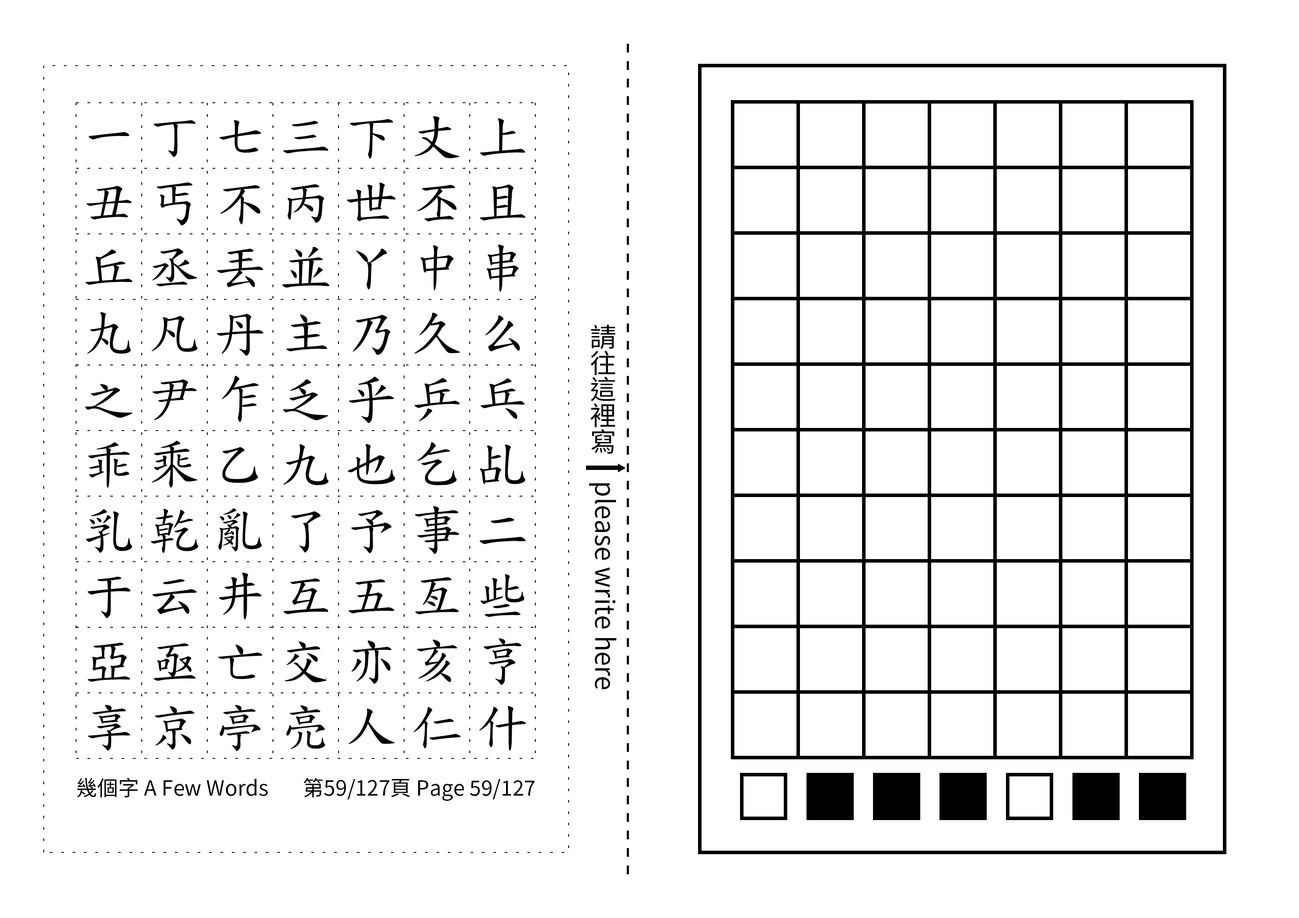
<style>
.page{position:relative;width:1299px;height:918px;background:#ffffff}
.page>*{position:absolute;margin:0}
.t1{font:52.5px/65.6px "TW-Kai-98_1";letter-spacing:0.25em;color:#000000}
.t2{font:26.2px "SourceHanSansTC-Regular";color:#000000}
.t3{font:21px "SourceHanSansTC-Regular";color:#000000}
</style>
<div class="page">
<p class="t1" style="left:85px;top:116px;width:441px;height:636px;text-align:center">一丁七三下丈上丑丐不丙世丕且丘丞丟並丫中串丸凡丹主乃久么之尹乍乏乎乒乓乖乘乙九也乞乩乳乾亂了予事二于云井互五亙些亞亟亡交亦亥亨享京亭亮人仁什</p>
<p class="t2" style="left:589px;top:324px;width:28px;height:366px;text-align:center">請往這裡寫　please write here</p>
<p class="t3" style="left:77px;top:778px;width:191px;height:20px">幾個字 A Few Words</p>
<p class="t3" style="left:303px;top:778px;width:232px;height:23px">第59/127頁 Page 59/127</p>
</div>
